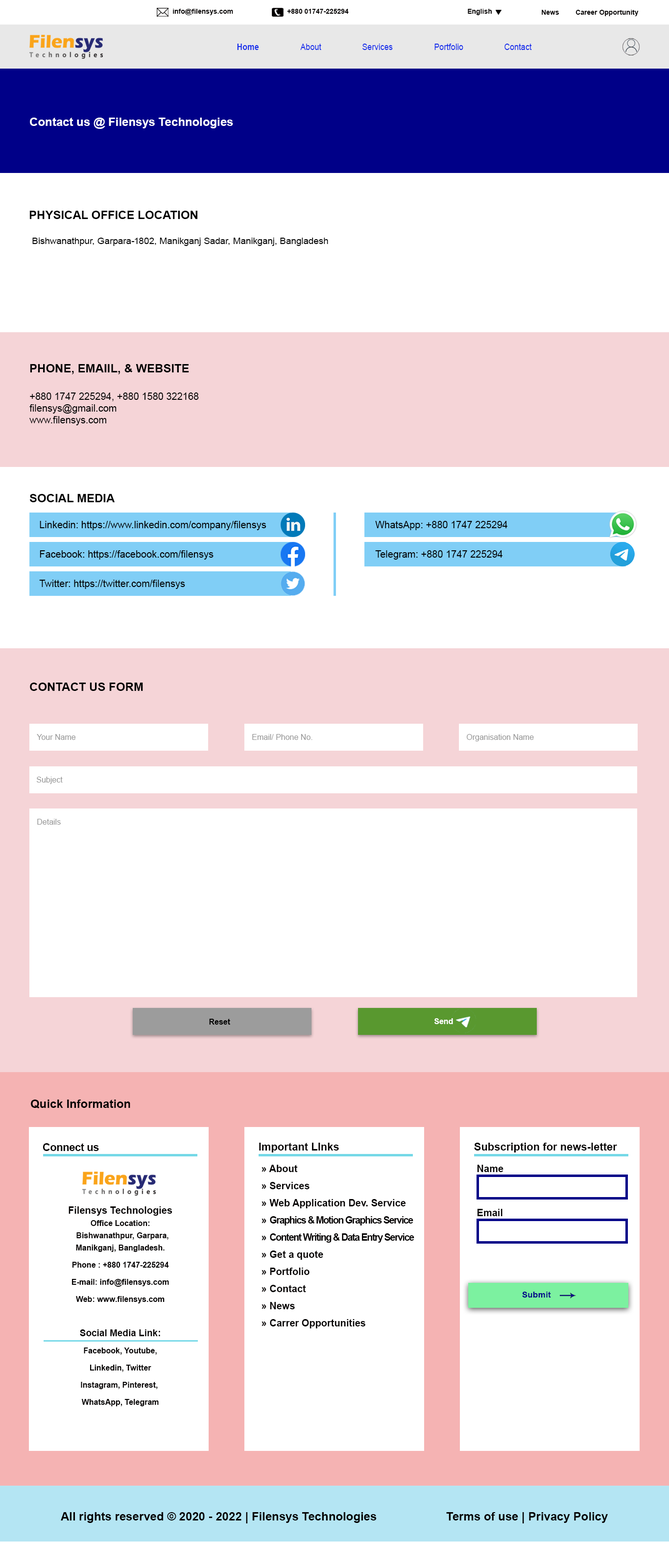
<style>
.page{position:relative;width:669px;height:1568px;background:#ffffff}
.page>*{position:absolute;margin:0}
.t1{font:6.9px "Arial-BoldMT";color:#030000}
.t2{font:8.8px "Arial-BoldMT";color:#152eeb;scale:0.9 1}
.t3{font:8.8px "ArialMT";color:#152eeb;scale:0.9 1}
.t4{font:11.8px "Arial-BoldMT";color:#ffffff}
.t5{font:11.8px "Arial-BoldMT";color:#000000}
.t6{font:8.8px "ArialMT";color:#000000;scale:1.06 1}
.t7{font:9.8px "ArialMT";color:#000000}
.t8{font:7.8px "ArialMT";color:#969696}
.t9{font:7.8px "Arial-BoldMT";color:#000000}
.t10{font:7.8px "Arial-BoldMT";color:#ffffff}
.t11{font:11.8px "Arial-BoldMT";color:#030000}
.t12{font:10.8px "Arial-BoldMT";letter-spacing:-0.02em;color:#030000}
.t13{font:10.8px "Arial-BoldMT";color:#030000}
.t14{font:9.8px/17.1px "Arial-BoldMT";color:#030000}
.t15{font:9.8px/17.1px "Arial-BoldMT";letter-spacing:-0.08em;color:#030000}
.t16{font:9.8px "Arial-BoldMT";color:#030000}
.t17{font:7.8px/17.1px "Arial-BoldMT";color:#030000}
.t18{font:7.8px/12.2px "Arial-BoldMT";color:#030000}
.t19{font:9.3px/17.1px "Arial-BoldMT";color:#030000}
.t20{font:7.8px "Arial-BoldMT";color:#000088;scale:1.09 1}
</style>
<div class="page">
<p class="t1" style="left:173px;top:9px;width:60px;height:6px">info@filensys.com</p>
<p class="t1" style="left:287px;top:9px;width:62px;height:5px">+880 01747-225294</p>
<p class="t1" style="left:468px;top:9px;width:24px;height:6px">English</p>
<p class="t1" style="left:542px;top:10px;width:18px;height:5px">News</p>
<p class="t1" style="left:576px;top:10px;width:63px;height:6px">Career Opportunity</p>
<p class="t2" style="left:237px;top:44px;width:22px;height:6px">Home</p>
<p class="t3" style="left:300px;top:44px;width:21px;height:6px">About</p>
<p class="t3" style="left:363px;top:44px;width:30px;height:6px">Services</p>
<p class="t3" style="left:435px;top:44px;width:29px;height:6px">Portfolio</p>
<p class="t3" style="left:505px;top:44px;width:27px;height:6px">Contact</p>
<p class="t4" style="left:30px;top:118px;width:203px;height:11px">Contact us @ Filensys Technologies</p>
<p class="t5" style="left:29px;top:211px;width:168px;height:8px">PHYSICAL OFFICE LOCATION</p>
<p class="t6" style="left:32px;top:238px;width:296px;height:8px">Bishwanathpur, Garpara-1802, Manikganj Sadar, Manikganj, Bangladesh</p>
<p class="t5" style="left:30px;top:364px;width:159px;height:10px">PHONE, EMAIIL, &amp; WEBSITE</p>
<p class="t7" style="left:29px;top:392px;width:170px;height:33px">+880 1747 225294, +880 1580 322168<br>filensys@gmail.com<br>www.filensys.com</p>
<p class="t5" style="left:29px;top:494px;width:86px;height:8px">SOCIAL MEDIA</p>
<p class="t7" style="left:40px;top:521px;width:227px;height:9px">Linkedin: https://www.linkedin.com/company/filensys</p>
<p class="t7" style="left:375px;top:521px;width:133px;height:9px">WhatsApp: +880 1747 225294</p>
<p class="t7" style="left:40px;top:550px;width:174px;height:10px">Facebook: https://facebook.com/filensys</p>
<p class="t7" style="left:375px;top:550px;width:128px;height:10px">Telegram: +880 1747 225294</p>
<p class="t7" style="left:39px;top:580px;width:146px;height:9px">Twitter: https://twitter.com/filensys</p>
<p class="t5" style="left:30px;top:683px;width:113px;height:8px">CONTACT US FORM</p>
<p class="t8" style="left:37px;top:734px;width:39px;height:6px">Your Name</p>
<p class="t8" style="left:252px;top:734px;width:61px;height:6px">Email/ Phone No.</p>
<p class="t8" style="left:467px;top:734px;width:67px;height:7px">Organisation Name</p>
<p class="t8" style="left:37px;top:777px;width:26px;height:7px">Subject</p>
<p class="t8" style="left:37px;top:819px;width:24px;height:6px">Details</p>
<p class="t9" style="left:209px;top:1019px;width:21px;height:6px">Reset</p>
<p class="t10" style="left:435px;top:1018px;width:18px;height:6px">Send</p>
<p class="t11" style="left:31px;top:1100px;width:99px;height:8px">Quick Information</p>
<p class="t12" style="left:43px;top:1143px;width:56px;height:8px">Connect us</p>
<p class="t13" style="left:259px;top:1143px;width:80px;height:9px">Important LInks</p>
<p class="t13" style="left:474px;top:1143px;width:143px;height:9px">Subscription for news-letter</p>
<p class="t14" style="left:262px;top:1165px;width:153px;height:163px">» About <br>» Services<br>» Web Application Dev. Service<br>» <span class="t15">Graphics &amp; Motion Graphics Service<br></span>» <span class="t15">Content Writing &amp; Data Entry Service<br></span>» Get a quote<br>» Portfolio<br>» Contact<br>» News<br>» Carrer Opportunities</p>
<p class="t16" style="left:477px;top:1165px;width:27px;height:7px">Name</p>
<p class="t17" style="left:69px;top:1206px;width:103px;height:200px;text-align:center"><span class="t14"><br><br>Filensys Technologies<br></span><span class="t18">Office Location:<br>  Bishwanathpur, Garpara,<br>Manikganj, Bangladesh.<br></span>Phone : +880 1747-225294<br>E-mail: info@filensys.com<br>Web: www.filensys.com<br><br><span class="t19">Social Media Link:<br></span>Facebook, Youtube,<br>Linkedin, Twitter<br>Instagram, Pinterest, <br>WhatsApp, Telegram</p>
<p class="t16" style="left:478px;top:1209px;width:25px;height:7px">Email</p>
<p class="t20" style="left:522px;top:1292px;width:29px;height:6px">Submit</p>
<p class="t11" style="left:61px;top:1512px;width:316px;height:11px">All rights reserved © 2020 - 2022 | Filensys Technologies</p>
<p class="t11" style="left:446px;top:1512px;width:162px;height:11px">Terms of use | Privacy Policy</p>
</div>
